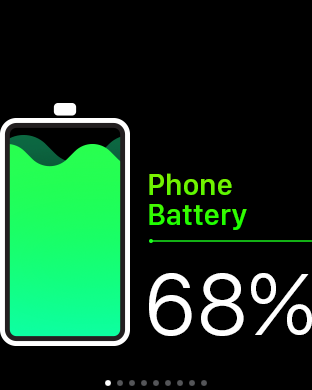
<style>
.page{position:relative;width:312px;height:390px;background:#000000}
.page>*{position:absolute;margin:0}
.t1{font:30px/30px "SanFranciscoDisplay-Semibold"}
.t2{font:92px "SanFranciscoDisplay-Regular";color:#ffffff}
</style>
<div class="page">
<p class="t1" style="left:149px;top:173px;width:98px;height:57px">Phone<br>Battery</p>
<p class="t2" style="left:149px;top:273px;width:163px;height:63px">68%</p>
</div>
